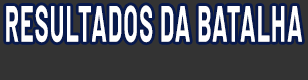
<style>
.page{position:relative;width:308px;height:80px;background:#333333}
.page>*{position:absolute;margin:0}
.t1{font:51.2px "Barlow-Bold";letter-spacing:0.05em;color:#ffffff;scale:0.45 1}
</style>
<div class="page">
<p class="t1" style="left:6px;top:5px;width:296px;height:38px">RESULTADOS DA BATALHA</p>
</div>
